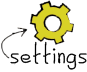
<style>
.page{position:relative;width:87px;height:72px;background:#ffffff}
.page>*{position:absolute;margin:0}
.t1{font:28.3px "DoodleJump";color:#000000}
</style>
<div class="page">
<p class="t1" style="left:10px;top:41px;width:77px;height:29px">settings</p>
</div>
